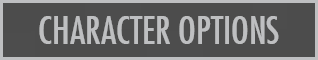
<style>
.page{position:relative;width:318px;height:60px;background:#4c4c4c}
.page>*{position:absolute;margin:0}
.t1{font:37.3px "FuturaCondensed";color:#bebfc1}
</style>
<div class="page">
<p class="t1" style="left:39px;top:16px;width:240px;height:28px">CHARACTER OPTIONS</p>
</div>
